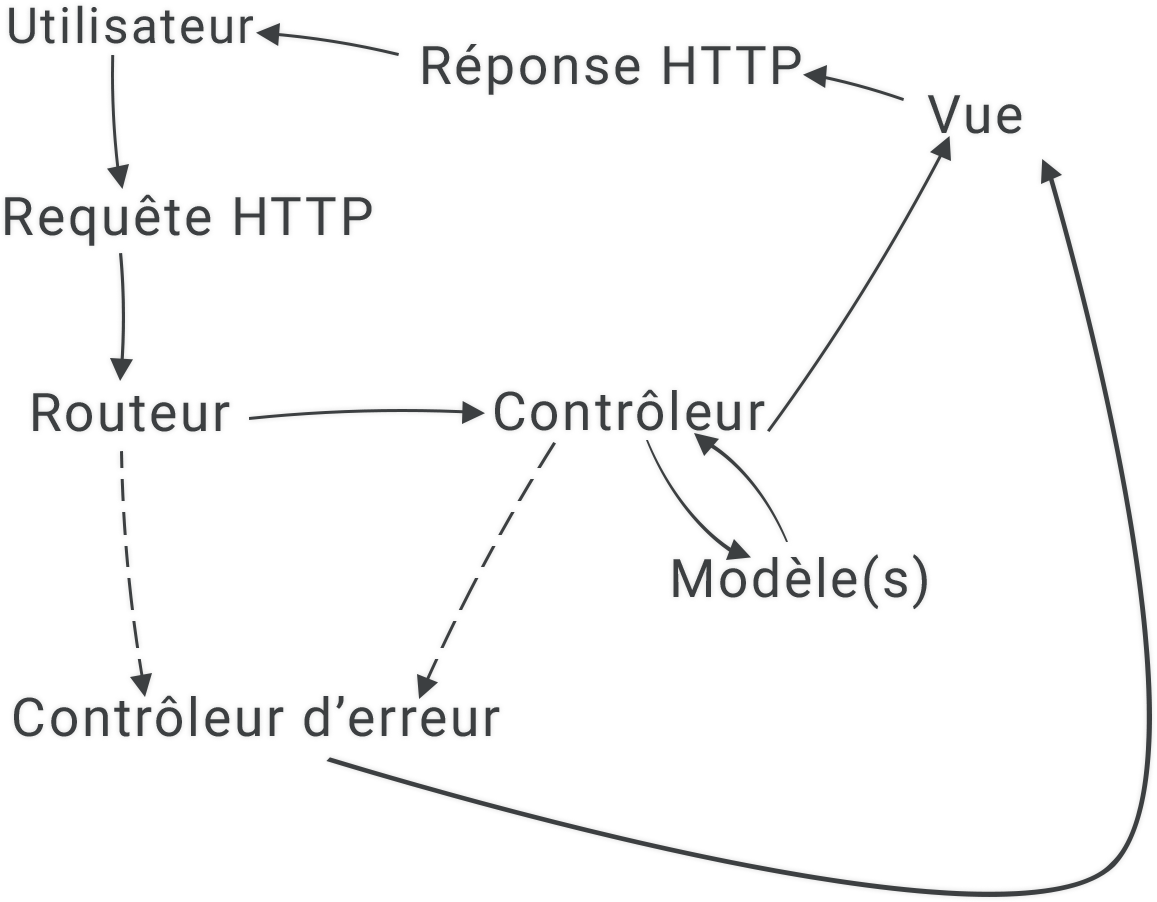
<style>
.page{position:relative;width:1157px;height:902px;background:#ffffff}
.page>*{position:absolute;margin:0}
.t1{font:49.6px "Roboto-Regular";letter-spacing:0.05em;color:#3c3f41}
.t2{font:53.3px "Roboto-Regular";letter-spacing:0.05em;color:#3c3f41}
</style>
<div class="page">
<p class="t1" style="left:9px;top:5px;width:244px;height:39px">Utilisateur</p>
<p class="t2" style="left:423px;top:44px;width:378px;height:51px">Réponse HTTP</p>
<p class="t2" style="left:927px;top:95px;width:95px;height:39px">Vue</p>
<p class="t2" style="left:5px;top:194px;width:367px;height:52px">Requête HTTP</p>
<p class="t2" style="left:495px;top:389px;width:270px;height:42px">Contrôleur</p>
<p class="t2" style="left:33px;top:393px;width:197px;height:39px">Routeur</p>
<p class="t2" style="left:673px;top:554px;width:254px;height:56px">Modèle(s)</p>
<p class="t2" style="left:14px;top:695px;width:486px;height:42px">Contrôleur d’erreur</p>
</div>
